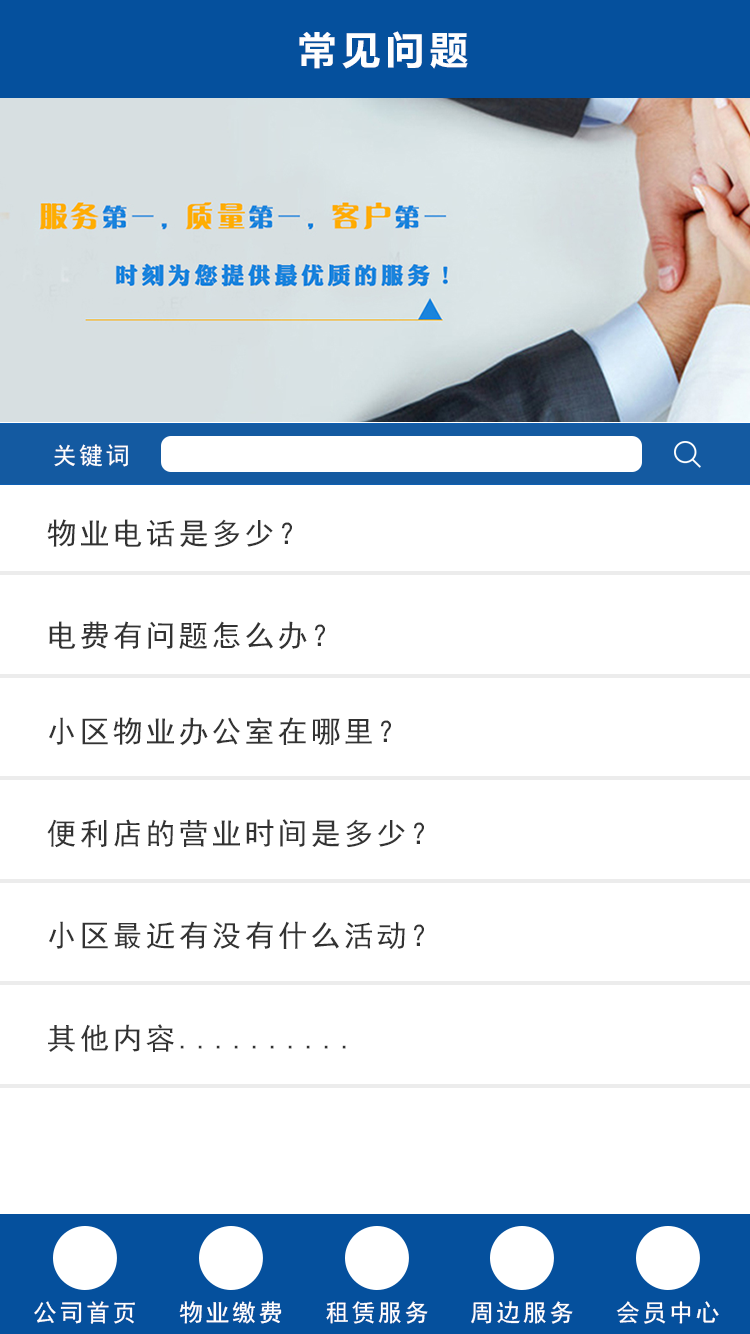
<style>
.page{position:relative;width:750px;height:1334px;background:#ffffff}
.page>*{position:absolute;margin:0}
.t1{font:40px "FZLTCHJW--GB1-0";letter-spacing:0.1em;color:#fefefe;text-transform:uppercase}
.t2{font:24px "SimHei";letter-spacing:0.1em;color:#fefefe;text-transform:uppercase}
.t3{font:30px "SimHei";letter-spacing:0.1em;color:#333333;text-transform:uppercase}
</style>
<div class="page">
<p class="t1" style="left:299px;top:31px;width:169px;height:38px">常见问题</p>
<p class="t2" style="left:54px;top:444px;width:74px;height:23px">关键词</p>
<p class="t3" style="left:47px;top:519px;width:245px;height:29px">物业电话是多少？</p>
<p class="t3" style="left:49px;top:621px;width:276px;height:29px">电费有问题怎么办？</p>
<p class="t3" style="left:49px;top:717px;width:342px;height:29px">小区物业办公室在哪里？</p>
<p class="t3" style="left:47px;top:819px;width:377px;height:29px">便利店的营业时间是多少？</p>
<p class="t3" style="left:49px;top:921px;width:375px;height:28px">小区最近有没有什么活动？</p>
<p class="t3" style="left:48px;top:1024px;width:298px;height:28px">其他内容..........</p>
<p class="t2" style="left:34px;top:1301px;width:101px;height:23px">公司首页</p>
<p class="t2" style="left:179px;top:1301px;width:103px;height:23px">物业缴费</p>
<p class="t2" style="left:326px;top:1301px;width:102px;height:23px">租赁服务</p>
<p class="t2" style="left:471px;top:1301px;width:102px;height:23px">周边服务</p>
<p class="t2" style="left:616px;top:1301px;width:103px;height:23px">会员中心</p>
</div>
